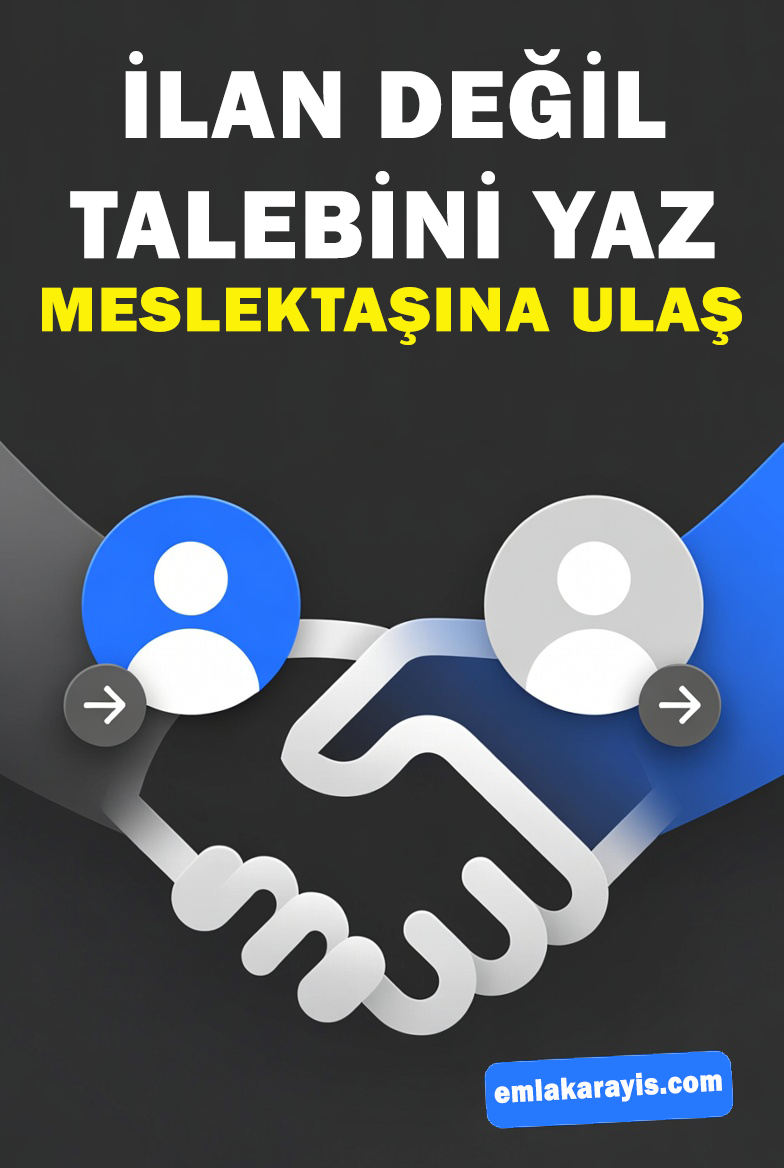
<style>
.page{position:relative;width:784px;height:1168px}
.page>*{position:absolute;margin:0}
.t1{font:100px "FranklinGothic-Heavy";letter-spacing:0.025em;color:#ffffff}
.t2{font:64.9px "FranklinGothic-Heavy";letter-spacing:0.025em;color:#fbf207;scale:1.06 1}
.t3{font:32.1px "FranklinGothic-Heavy";letter-spacing:0.025em;color:#fcfcfa;scale:0.85 1}
</style>
<div class="page">
<p class="t1" style="left:70px;top:49px;width:645px;height:210px;text-align:center">İLAN DEĞİL<br>TALEBİNİ YAZ</p>
<p class="t2" style="left:42px;top:287px;width:700px;height:58px">MESLEKTAŞINA ULAŞ</p>
<p class="t3" style="left:494px;top:1072px;width:228px;height:32px;rotate:-3deg">emlakarayis.com</p>
</div>
